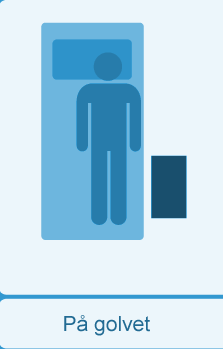
<style>
.page{position:relative;width:223px;height:349px;background:#ecf6fb}
.page>*{position:absolute;margin:0}
.t1{font:21px "ArialMT";color:#226b93}
</style>
<div class="page">
<p class="t1" style="left:64px;top:315px;width:86px;height:21px">På golvet</p>
</div>
